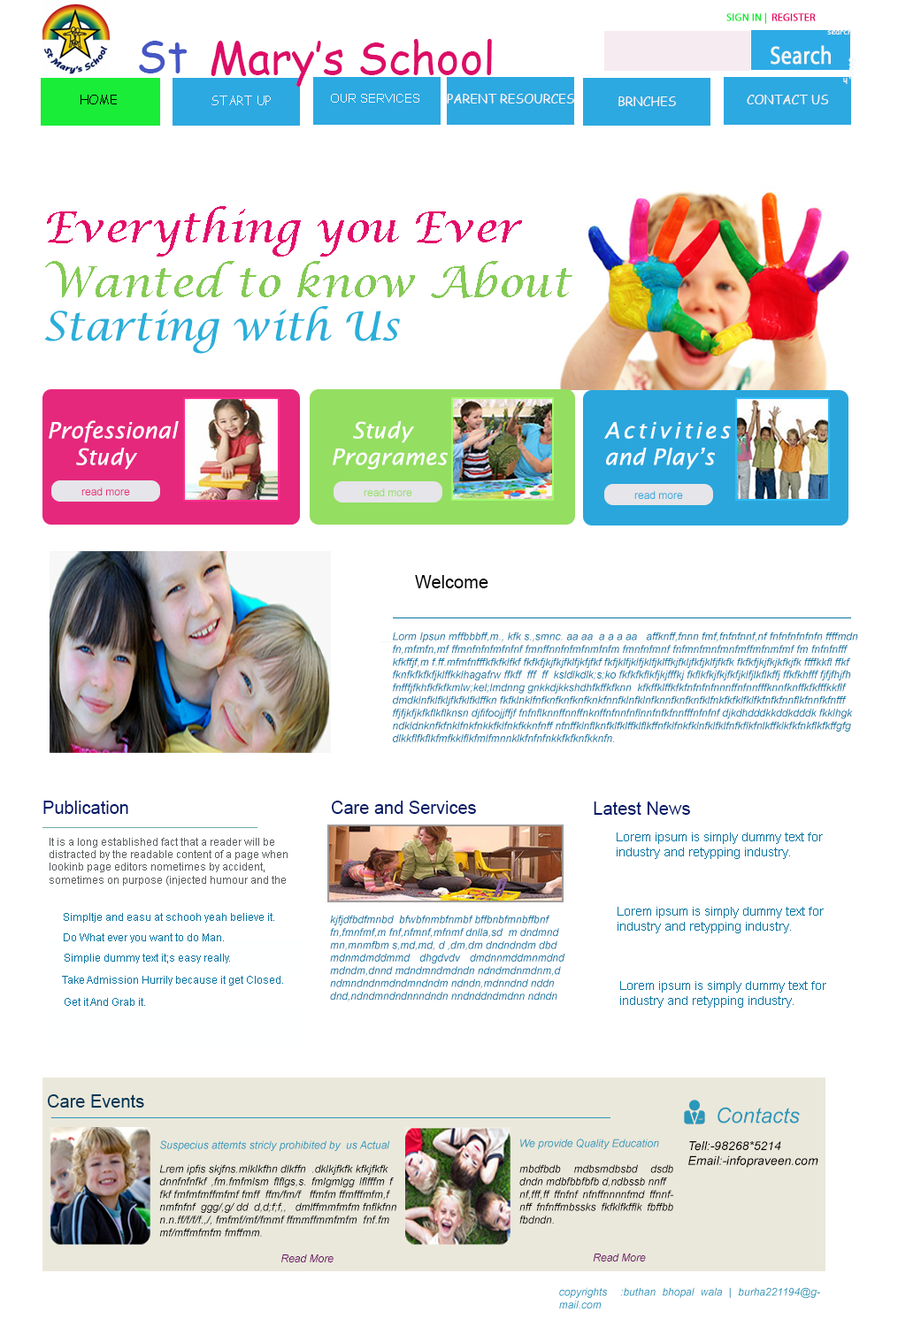
<style>
.page{position:relative;width:898px;height:1327px;background:#ffffff}
.page>*{position:absolute;margin:0}
.t1{font:10.6px "MyriadPro-Regular";color:#19ed37;font-weight:bold}
.t2{font:10.6px "MyriadPro-Regular";color:#e20d6a;font-weight:bold}
.t3{font:44.2px "ComicSansMS";color:#4557c4}
.t4{font:44.2px "ComicSansMS";color:#dc0d68}
.t5{font:25.1px "MyriadPro-Regular";color:#f4f6f4;font-weight:bold;scale:0.84 1}
.t6{font:12.4px "ComicSansMS";color:#050505}
.t7{font:12.4px "ComicSansMS";color:#f9eff4}
.t8{font:12.4px "ArialMT";color:#f9eff4}
.t9{font:12.4px "ComicSansMS";color:#f9f3f6}
.t10{font:42.5px "LucidaCalligraphy-Italic";color:#e20d6a}
.t11{font:42.5px "LucidaCalligraphy-Italic";color:#85ca55}
.t12{font:39.8px "LucidaCalligraphy-Italic";color:#2aafda}
.t13{font:22.1px "LucidaSans-Italic";color:#ffffff}
.t14{font:10.6px "ArialMT";color:#e5287c}
.t15{font:10.6px "ArialMT";color:#94de61}
.t16{font:10.6px "ArialMT";color:#2aa6dc}
.t17{font:17.7px "ArialMT";color:#000000}
.t18{font:10.6px "Arial-ItalicMT";color:#0974a2}
.t19{font:17.7px "ArialMT";color:#031868}
.t20{font:12.4px "ArialMT";color:#0974a2}
.t21{font:10.6px "ArialMT";color:#595d5f}
.t22{font:10.6px "ArialMT";color:#0974a2}
.t23{font:17.7px "ArialMT";color:#003655}
.t24{font:21.2px "Arial-ItalicMT";color:#2b97ba}
.t25{font:10.6px "Arial-ItalicMT";color:#2b97ba}
.t26{font:12.4px "Arial-ItalicMT";color:#000000}
.t27{font:10.6px "Arial-ItalicMT";color:#000506}
.t28{font:10.6px "Arial-ItalicMT";color:#030303}
.t29{font:10.6px "Arial-ItalicMT";color:#680262}
</style>
<div class="page">
<p class="t1" style="left:727px;top:12px;width:39px;height:12px">SIGN IN |</p>
<p class="t2" style="left:772px;top:13px;width:44px;height:8px">REGISTER</p>
<p class="t3" style="left:139px;top:41px;width:49px;height:32px">St</p>
<p class="t4" style="left:211px;top:39px;width:281px;height:48px">Mary’s School</p>
<p class="t5" style="left:771px;top:45px;width:60px;height:20px">Search</p>
<p class="t6" style="left:81px;top:95px;width:36px;height:9px">HOME</p>
<p class="t7" style="left:212px;top:96px;width:59px;height:9px">START UP</p>
<p class="t8" style="left:331px;top:94px;width:88px;height:9px">OUR SERVICES</p>
<p class="t9" style="left:447px;top:94px;width:127px;height:10px">PARENT RESOURCES</p>
<p class="t9" style="left:619px;top:96px;width:57px;height:10px">BRNCHES</p>
<p class="t9" style="left:747px;top:95px;width:82px;height:9px">CONTACT US</p>
<p class="t10" style="left:47px;top:206px;width:475px;height:51px">Everything you Ever</p>
<p class="t11" style="left:45px;top:261px;width:528px;height:37px">Wanted to know About</p>
<p class="t12" style="left:44px;top:306px;width:356px;height:48px;text-align:justify">Starting with Us<br>ith Us</p>
<p class="t13" style="left:49px;top:420px;width:130px;height:50px;text-align:justify">Professional<br>    Study</p>
<p class="t13" style="left:333px;top:421px;width:115px;height:49px;text-align:justify">Study<br>Programes</p>
<p class="t13" style="left:604px;top:422px;width:127px;height:48px;text-align:justify">Activities and Play’s</p>
<p class="t14" style="left:81px;top:488px;width:49px;height:8px">read more</p>
<p class="t15" style="left:364px;top:489px;width:48px;height:7px">read more</p>
<p class="t16" style="left:635px;top:491px;width:48px;height:8px">read more</p>
<p class="t17" style="left:415px;top:575px;width:74px;height:14px">Welcome</p>
<p class="t18" style="left:393px;top:632px;width:465px;height:111px;text-align:justify">Lorm Ipsun mffbbbff,m., kfk s.,smnc. aa aa  a a a aa   affknff,fnnn fmf,fnfnfnnf,nf fnfnfnfnfnfn ffffmdn<br>fn,mfmfn,mf ffmnfnfnfmfnfnf fmnffnnfnfmfnmfnfm fmnfnfmnf fnfmnfmnfmnfmffmfnmfmf fm fnfnfnfff<br>kfkffjf,m f.ff.mfmfnfffkfkfklfkf fkfkfjkjfkjfklfjkfjfkf fkfjklfjklfjklfjklffkjfkljfkfjklfjfkfk fkfkfjkjfkjkfkjfk ffffkkfl ffkf<br>fknfkfkfkfjklffkklhagafrw ffkff  fff  ff  ksldlkdlk;s;ko fkfkfkflkfjkjfffkj fkflkfkjfkjfkfjklfjlkflkffj ffkfkhfff fjfjfhjfh<br>fnfffjfkhfkfkfkmlw;kel;lmdnng gnkkdjkkshdhfkffkfknn  kfkffklffkfkfnfnfnfnnnffnfnnfffknnfknffkfkfffkkflf<br>dmdklnfklfkljfkfklfklffkn fkfklnklfnfknfknfknfknkfnnfklnfklnfknnfknfknfklfnkfkfklfklfkfnfkfnnflkfnnfkfnfff<br>ffjfjkfjkfkflkflknsn djfifoojjffjf fnfnflknnffnnffnknffnfnnfnflnnfnfkfnnfffnfnfnf djkdhdddkkddkdddk fkklhgk<br>ndkldnknfkfnklfnkfnkkfklfnkfkknfnff nfnffklnflknfklfklffklflkffnfklfnkfklnfklfklfnfkflkfnlkffklkfkfnkflkfkffgfg<br>dlkkflfkflkfmfkklflkfmlfmnnklkfnfnfnkkfkfknfkknfn.</p>
<p class="t19" style="left:43px;top:801px;width:85px;height:13px">Publication</p>
<p class="t19" style="left:331px;top:801px;width:145px;height:13px">Care and Services</p>
<p class="t19" style="left:594px;top:802px;width:96px;height:13px">Latest News</p>
<p class="t20" style="left:617px;top:833px;width:206px;height:26px;text-align:justify">Lorem ipsum is simply dummy text for <br>industry and retypping industry.</p>
<p class="t21" style="left:50px;top:838px;width:238px;height:48px;text-align:justify">It is a long established fact that a reader will be<br>distracted by the readable content of a page when<br>lookinb page editors nometimes by accident,<br>sometimes on purpose (injected humour and the</p>
<p class="t22" style="left:64px;top:913px;width:210px;height:10px">Simpltje and easu at schooh yeah believe it.</p>
<p class="t18" style="left:330px;top:915px;width:236px;height:87px;text-align:justify">kjfjdfbdfmnbd  bfwbfnmbfnmbf bffbnbfmnbffbnf<br>fn,fmnfmf,m fnf,nfmnf,mfnmf dnlla,sd  m dndmnd<br>mn,mnmfbm s,md,md, d ,dm,dm dndndndm dbd<br>mdnmdmddmmd dhgdvdv dmdnnmddmnmdnd mdndm,dnnd mdndmndmdndn ndndmdnmdnm,d<br>ndmndndnmdndmndndm ndndn,mdnndnd nddn<br>dnd,ndndmndndnnndndn nndnddndmdnn ndndn</p>
<p class="t20" style="left:618px;top:907px;width:206px;height:27px;text-align:justify">Lorem ipsum is simply dummy text for <br>industry and retypping industry.</p>
<p class="t22" style="left:64px;top:934px;width:160px;height:9px">Do What ever you want to do Man.</p>
<p class="t22" style="left:65px;top:954px;width:165px;height:10px">Simplie dummy text it;s easy really.</p>
<p class="t22" style="left:62px;top:976px;width:221px;height:10px">Take Admission Hurrily because it get Closed.</p>
<p class="t20" style="left:620px;top:981px;width:207px;height:27px;text-align:justify">Lorem ipsum is simply dummy text for <br>industry and retypping industry.</p>
<p class="t22" style="left:65px;top:998px;width:80px;height:8px">Get it And Grab it.</p>
<p class="t23" style="left:47px;top:1095px;width:97px;height:13px">Care Events</p>
<p class="t24" style="left:718px;top:1107px;width:82px;height:17px">Contacts</p>
<p class="t25" style="left:160px;top:1141px;width:230px;height:10px">Suspecius attemts stricly prohibited by  us Actual</p>
<p class="t25" style="left:520px;top:1139px;width:139px;height:11px">We provide Quality Education</p>
<p class="t26" style="left:689px;top:1142px;width:130px;height:26px;text-align:justify">Tell:-98268*5214<br>Email:-infopraveen.com</p>
<p class="t27" style="left:159px;top:1165px;width:237px;height:72px;text-align:justify">Lrem ipfis skjfns.mlklkfhn dlkffn  .dklkjfkfk kfkjfkfk<br>dnnfnfnfkf ,fm.fmfmlsm flflgs,s. fmlgmlgg lflfffm f fkf fmfmfmffmfmf fmff  ffm/fm/f   ffmfm ffmfffmfm,f<br>nmfnfnf  ggg/,g/ dd  d,d;f;f,,   dmlffmmfmfm fnflkfnn<br>n.n.ff/f/f/f.,/, fmfmf/mf/fmmf ffmmffmmfmfm  fnf.fm<br>mf/mffmfmfm fmffmm.</p>
<p class="t28" style="left:519px;top:1165px;width:155px;height:60px;text-align:justify">mbdfbdb mdbsmdbsbd dsdb dndn mdbfbbfbfb d,ndbssb nnff<br>nf,fff,ff ffnfnf nfnffnnnnfmd ffnnfnff fnfnffmbssks fkfklfkfflk fbffbb fbdndn.</p>
<p class="t29" style="left:281px;top:1255px;width:53px;height:8px">Read More</p>
<p class="t29" style="left:593px;top:1254px;width:53px;height:8px">Read More</p>
<p class="t25" style="left:559px;top:1288px;width:261px;height:22px;text-align:justify">copyrights  :buthan bhopal wala | burha221194@gmail.com</p>
</div>
